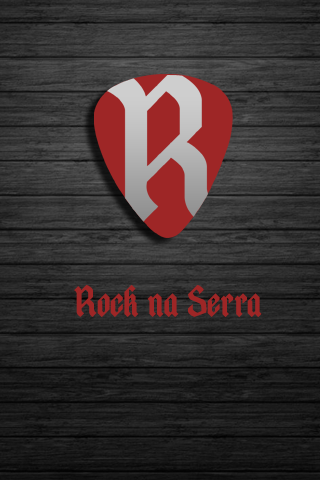
<style>
.page{position:relative;width:320px;height:480px}
.page>*{position:absolute;margin:0}
.t1{font:39.3px "Atreyu";color:#9e2626}
</style>
<div class="page">
<p class="t1" style="left:74px;top:285px;width:188px;height:32px">Rock na Serra</p>
</div>
